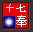
<style>
.page{position:relative;width:33px;height:32px;background:#f20000}
.page>*{position:absolute;margin:0}
.t1{font:10.4px "SimSun";color:#ffffff}
.t2{font:11.7px "SimSun";color:#ffffff}
</style>
<div class="page">
<p class="t1" style="left:6px;top:4px;width:20px;height:8px">十七</p>
<p class="t2" style="left:16px;top:15px;width:11px;height:12px">奉</p>
</div>
